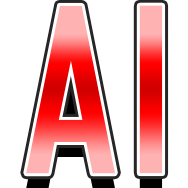
<style>
.page{position:relative;width:188px;height:188px;background:#ffffff}
.page>*{position:absolute;margin:0}
.t1{font:239.2px "OdibeeSans-Regular"}
</style>
<div class="page">
<p class="t1" style="left:26px;top:5px;width:137px;height:169px">AI</p>
</div>
